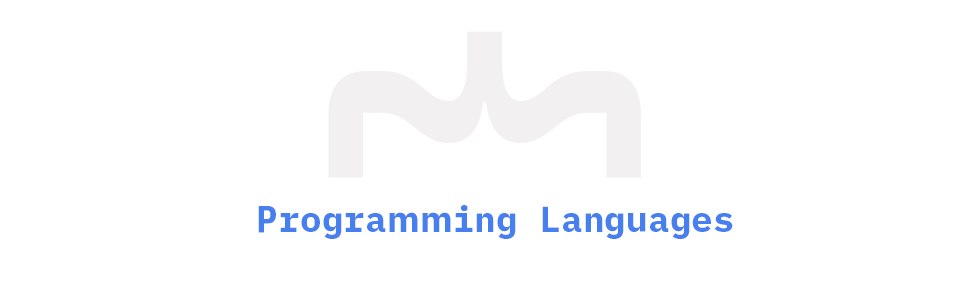
<style>
.page{position:relative;width:966px;height:281px;background:#ffffff}
.page>*{position:absolute;margin:0}
.t1{font:347.9px "iAWriterDuospace-Bold";color:#f2f0f1}
.t2{font:36px "iAWriterDuospace-Bold";color:#487fee}
</style>
<div class="page">
<p class="t1" style="left:328px;top:31px;width:313px;height:147px;rotate:-90deg">{</p>
<p class="t2" style="left:258px;top:205px;width:475px;height:34px">Programming Languages</p>
</div>
